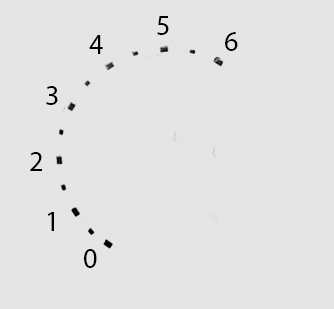
<style>
.page{position:relative;width:334px;height:309px;background:#e5e5e5}
.page>*{position:absolute;margin:0}
.t1{font:28px "MyriadPro-Regular";color:#000000}
</style>
<div class="page">
<p class="t1" style="left:157px;top:16px;width:12px;height:19px">5</p>
<p class="t1" style="left:89px;top:35px;width:14px;height:19px">4</p>
<p class="t1" style="left:225px;top:32px;width:13px;height:19px">6</p>
<p class="t1" style="left:46px;top:86px;width:12px;height:19px">3</p>
<p class="t1" style="left:30px;top:152px;width:12px;height:19px">2</p>
<p class="t1" style="left:47px;top:212px;width:7px;height:19px">1</p>
<p class="t1" style="left:84px;top:249px;width:13px;height:19px">0</p>
</div>
